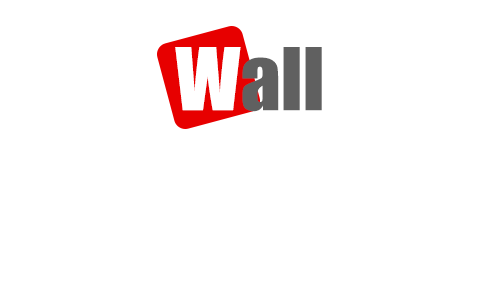
<style>
.page{position:relative;width:500px;height:300px;background:#ffffff}
.page>*{position:absolute;margin:0}
.t1{font:80px "Impact";color:#606060}
.t2{font:80px "Impact";color:#ffffff}
</style>
<div class="page">
<p class="t1" style="left:175px;top:47px;width:147px;height:65px"><span class="t2">W</span>all</p>
</div>
